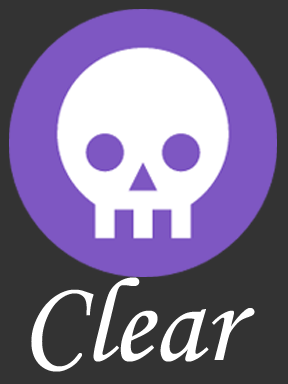
<style>
.page{position:relative;width:288px;height:384px;background:#333333}
.page>*{position:absolute;margin:0}
.t1{font:120px "MonotypeCorsiva";color:#ffffff}
</style>
<div class="page">
<p class="t1" style="left:31px;top:277px;width:224px;height:95px">Clear</p>
</div>
